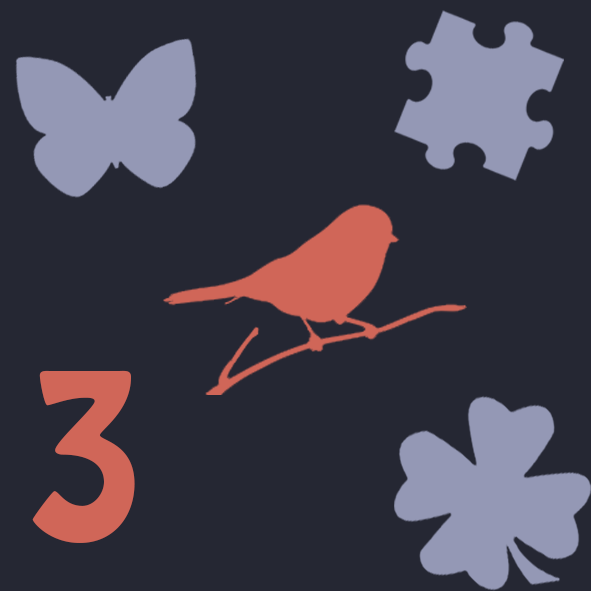
<style>
.page{position:relative;width:591px;height:591px;background:#252733}
.page>*{position:absolute;margin:0}
.t1{font:208.3px "HoboStd";color:#d06658}
</style>
<div class="page">
<p class="t1" style="left:32px;top:370px;width:103px;height:173px">3</p>
</div>
